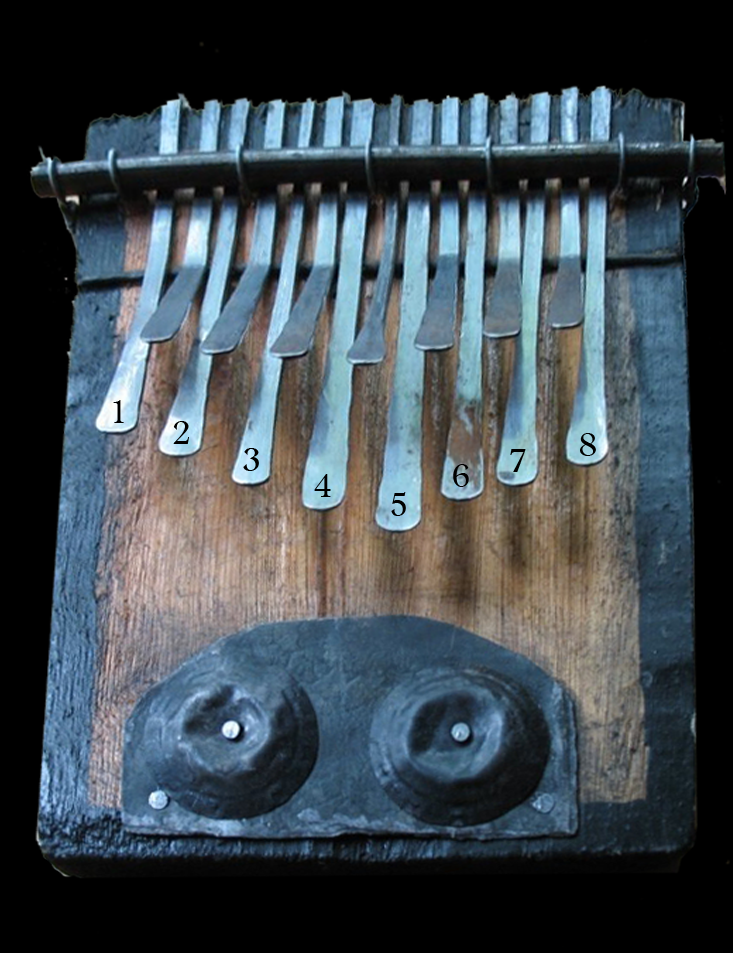
<style>
.page{position:relative;width:733px;height:953px;background:#000000}
.page>*{position:absolute;margin:0}
.t1{font:37.5px "DevanagariMT";color:#000000}
</style>
<div class="page">
<p class="t1" style="left:113px;top:400px;width:11px;height:23px">1</p>
<p class="t1" style="left:173px;top:421px;width:16px;height:23px">2</p>
<p class="t1" style="left:580px;top:433px;width:16px;height:23px">8</p>
<p class="t1" style="left:243px;top:448px;width:16px;height:23px">3</p>
<p class="t1" style="left:510px;top:449px;width:16px;height:23px">7</p>
<p class="t1" style="left:453px;top:464px;width:16px;height:23px">6</p>
<p class="t1" style="left:314px;top:474px;width:17px;height:23px">4</p>
<p class="t1" style="left:391px;top:492px;width:15px;height:24px">5</p>
</div>
